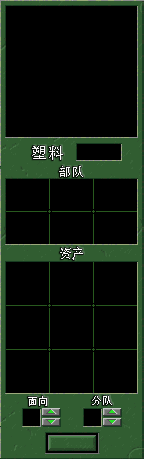
<style>
.page{position:relative;width:144px;height:459px;background:#000000}
.page>*{position:absolute;margin:0}
.t1{font:16px "AdobeHeitiStd-Regular";letter-spacing:0.025em;color:#ffffff}
.t2{font:12px "AdobeHeitiStd-Regular";letter-spacing:0.025em;color:#ffffff}
.t3{font:10px "AdobeHeitiStd-Regular";letter-spacing:0.025em;color:#ffffff}
</style>
<div class="page">
<p class="t1" style="left:32px;top:146px;width:31px;height:14px">塑料</p>
<p class="t2" style="left:59px;top:166px;width:24px;height:11px">部队</p>
<p class="t2" style="left:60px;top:247px;width:23px;height:13px">资产</p>
<p class="t3" style="left:28px;top:396px;width:19px;height:10px">面向</p>
<p class="t3" style="left:92px;top:396px;width:20px;height:9px">分队</p>
</div>
